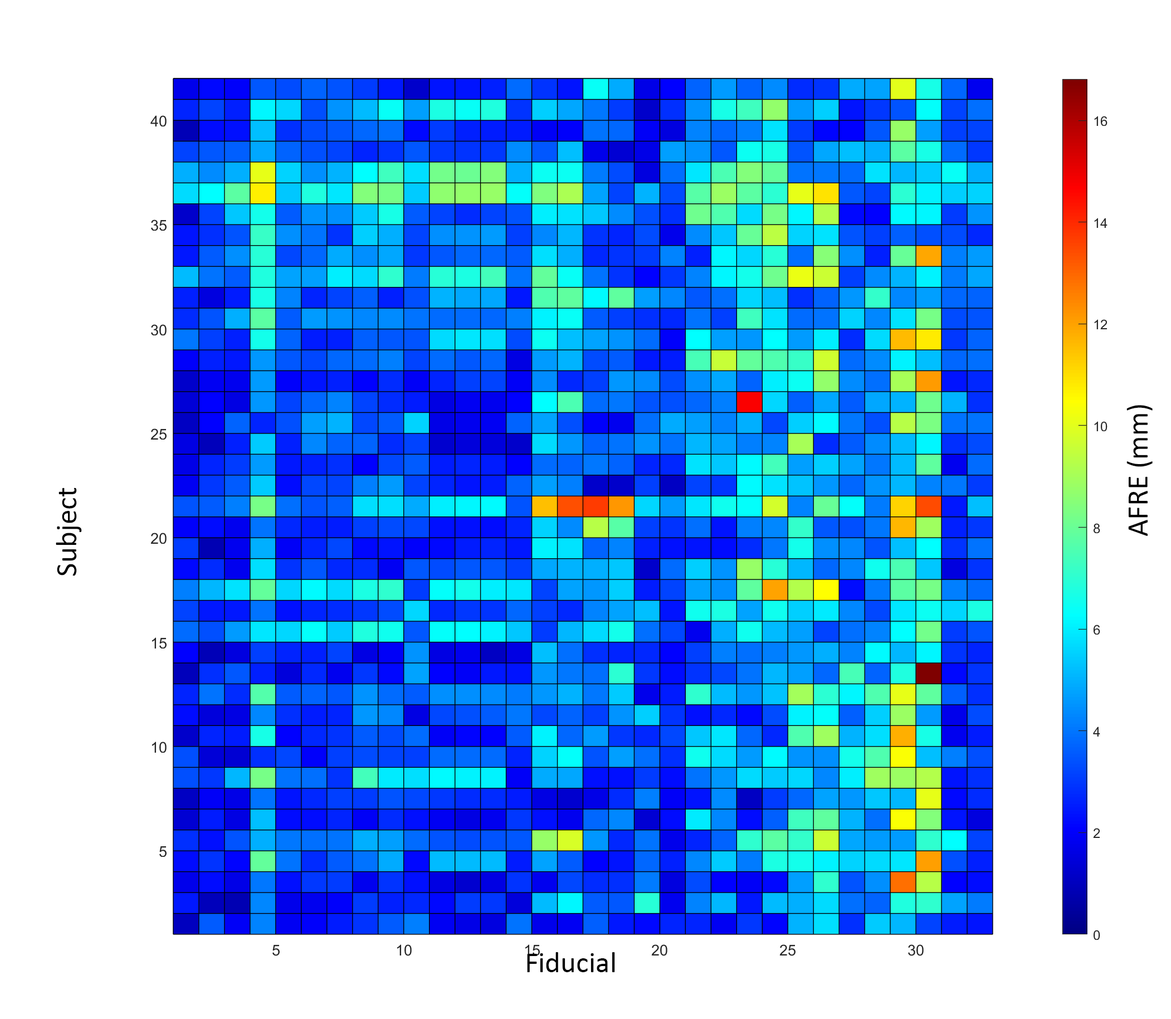
<style>
.page{position:relative;width:1171px;height:1019px;background:#ffffff}
.page>*{position:absolute;margin:0}
.t1{font:29.7px "Calibri";color:#000000}
</style>
<div class="page">
<p class="t1" style="left:1126px;top:405px;width:26px;height:131px;rotate:-90deg">AFRE (mm)</p>
<p class="t1" style="left:56px;top:487px;width:26px;height:89px;rotate:-90deg">Subject</p>
<p class="t1" style="left:527px;top:952px;width:88px;height:20px">Fiducial</p>
</div>
